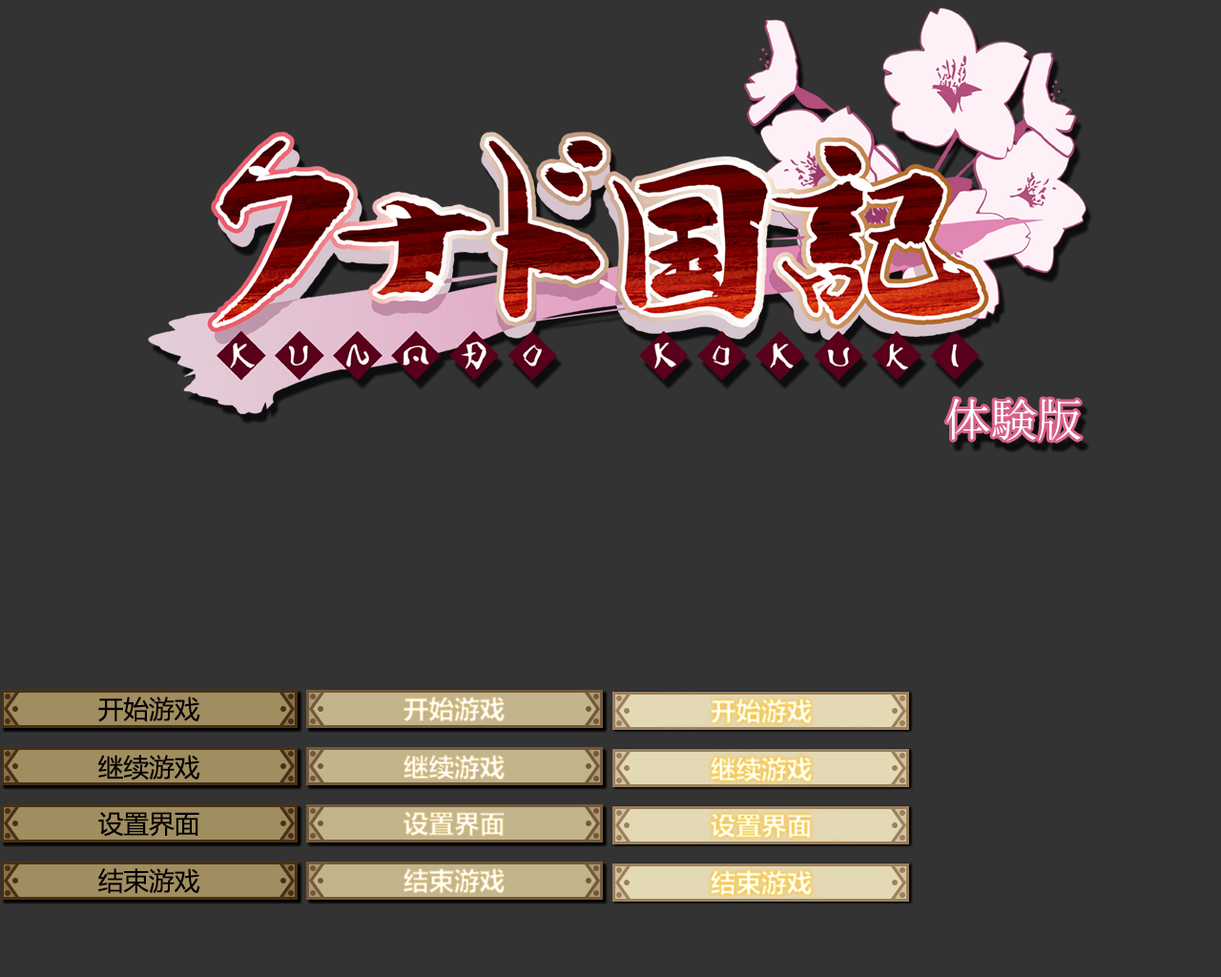
<style>
.page{position:relative;width:1221px;height:977px;background:#333333}
.page>*{position:absolute;margin:0}
.t1{font:25.4px "MicrosoftYaHei";color:#000000}
.t2{font:25.4px "MicrosoftYaHei-Bold"}
</style>
<div class="page">
<p class="t1" style="left:98px;top:696px;width:102px;height:26px">开始游戏</p>
<p class="t2" style="left:403px;top:696px;width:103px;height:26px">开始游戏</p>
<p class="t2" style="left:711px;top:698px;width:102px;height:26px">开始游戏</p>
<p class="t1" style="left:98px;top:754px;width:102px;height:26px">继续游戏</p>
<p class="t2" style="left:403px;top:754px;width:103px;height:26px">继续游戏</p>
<p class="t2" style="left:711px;top:756px;width:102px;height:26px">继续游戏</p>
<p class="t1" style="left:98px;top:812px;width:101px;height:24px">设置界面</p>
<p class="t2" style="left:403px;top:811px;width:102px;height:25px">设置界面</p>
<p class="t2" style="left:711px;top:813px;width:101px;height:25px">设置界面</p>
<p class="t1" style="left:98px;top:868px;width:102px;height:26px">结束游戏</p>
<p class="t2" style="left:403px;top:868px;width:103px;height:26px">结束游戏</p>
<p class="t2" style="left:711px;top:870px;width:102px;height:26px">结束游戏</p>
</div>
